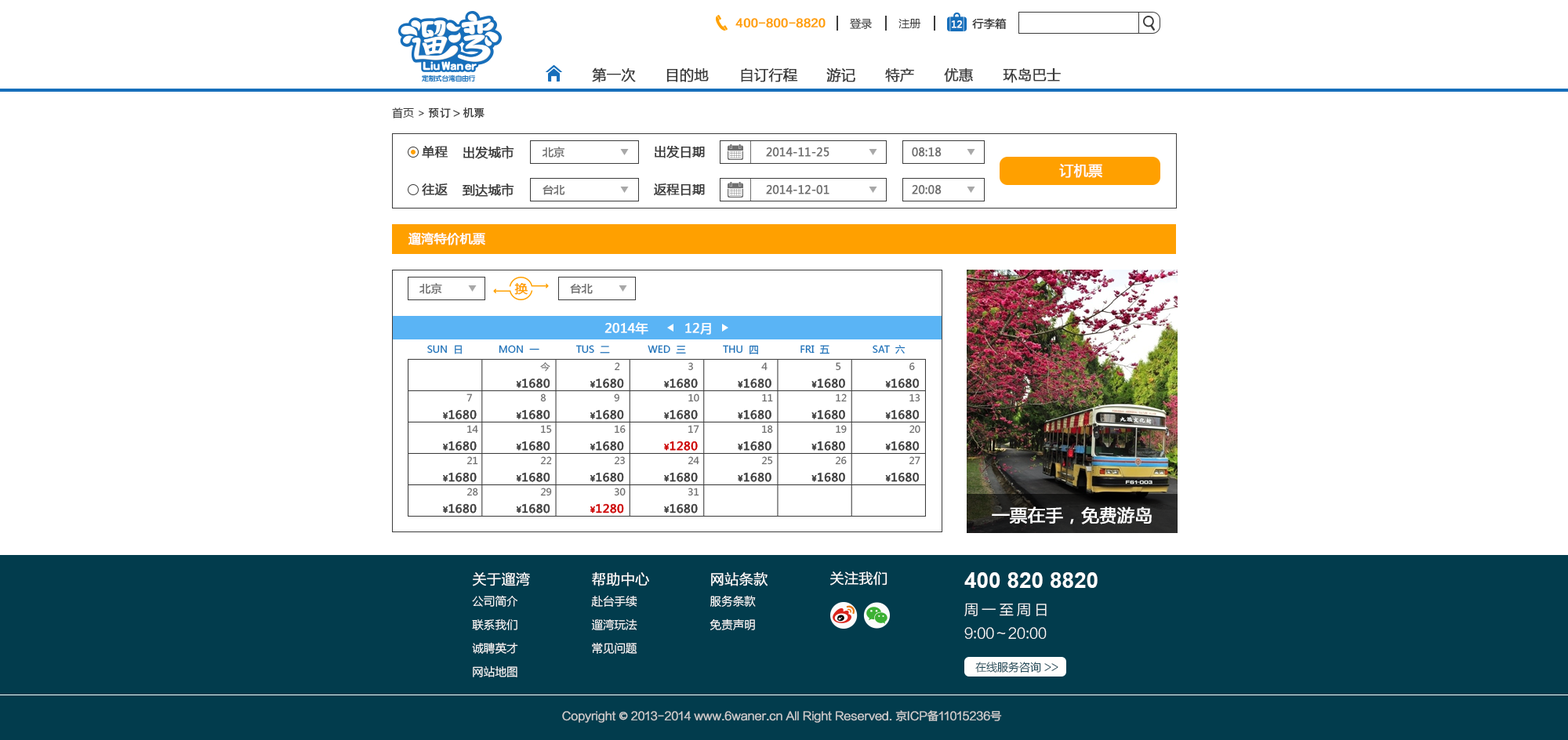
<style>
.page{position:relative;width:1568px;height:740px;background:#ffffff}
.page>*{position:absolute;margin:0}
.t1{font:11px "FZLTZHK--GBK1-0";color:#ffa000;font-weight:bold}
.t2{font:11px "MicrosoftYaHei";color:#3c3c3c}
.t3{font:9.4px "MicrosoftYaHei";color:#fefefe;font-weight:bold}
.t4{font:11px "MicrosoftYaHei";color:#3c3c3c;font-weight:bold}
.t5{font:14.1px "MicrosoftYaHei";color:#3c3c3c;font-weight:bold}
.t6{font:11px "AdobeHeitiStd-Regular";color:#3c3c3c}
.t7{font:12.5px "MicrosoftYaHei";color:#3c3c3c;font-weight:bold}
.t8{font:11px "MicrosoftYaHei";color:#6e6e6e;font-weight:bold}
.t9{font:14.1px "MicrosoftYaHei";color:#ffffff;font-weight:bold}
.t10{font:12.5px "MicrosoftYaHei";color:#ffffff;font-weight:bold}
.t11{font:12.5px "MicrosoftYaHei";color:#ffa000;font-weight:bold}
.t12{font:17.2px "MicrosoftYaHei";color:#ffffff;font-weight:bold}
.t13{font:11.4px/23.5px "FZLTXHK--GBK1-0";color:#ffffff}
.t14{font:14.1px/23.5px "FZLTXHK--GBK1-0";color:#ffffff;font-weight:bold}
.t15{font:14.1px "FZLTXHK--GBK1-0";color:#ffffff;font-weight:bold}
.t16{font:22px "Arial-BoldMT";color:#ffffff}
.t17{font:14.1px/23.5px "FZLTXHK--GBK1-0";color:#ffffff}
.t18{font:14.1px/23.5px "FZLTXHK--GBK1-0";letter-spacing:0.24em;color:#ffffff}
.t19{font:11px "FZLTXHK--GBK1-0"}
.t20{font:11px "FZLTXHK--GBK1-0";color:#d0d0d0;font-weight:bold}
.t21{font:11px "AdobeHeitiStd-Regular";color:#d0d0d0;font-weight:bold}
</style>
<div class="page">
<p class="t1" style="left:735px;top:18px;width:91px;height:10px">400-800-8820</p>
<p class="t2" style="left:850px;top:18px;width:22px;height:11px">登录</p>
<p class="t2" style="left:898px;top:19px;width:23px;height:9px">注册</p>
<p class="t3" style="left:951px;top:20px;width:11px;height:8px">12</p>
<p class="t4" style="left:972px;top:18px;width:35px;height:12px">行李箱</p>
<p class="t5" style="left:592px;top:67px;width:44px;height:15px">第一次</p>
<p class="t5" style="left:666px;top:68px;width:43px;height:14px">目的地</p>
<p class="t5" style="left:741px;top:68px;width:57px;height:14px">自订行程</p>
<p class="t5" style="left:826px;top:68px;width:29px;height:14px">游记</p>
<p class="t5" style="left:885px;top:68px;width:29px;height:14px">特产</p>
<p class="t5" style="left:944px;top:68px;width:29px;height:14px">优惠</p>
<p class="t5" style="left:1003px;top:68px;width:58px;height:15px">环岛巴士</p>
<p class="t6" style="left:392px;top:107px;width:93px;height:11px"><span class="t2">首页 &gt; </span>预订 &gt; 机票</p>
<p class="t7" style="left:422px;top:146px;width:26px;height:12px">单程</p>
<p class="t7" style="left:463px;top:146px;width:51px;height:13px">出发城市</p>
<p class="t8" style="left:542px;top:147px;width:22px;height:11px">北京</p>
<p class="t7" style="left:655px;top:146px;width:50px;height:12px">出发日期</p>
<p class="t8" style="left:766px;top:147px;width:63px;height:10px">2014-11-25</p>
<p class="t8" style="left:912px;top:147px;width:30px;height:10px">08:18</p>
<p class="t9" style="left:1059px;top:164px;width:43px;height:14px">订机票</p>
<p class="t7" style="left:422px;top:183px;width:26px;height:13px">往返</p>
<p class="t7" style="left:462px;top:183px;width:52px;height:14px">到达城市</p>
<p class="t8" style="left:543px;top:185px;width:22px;height:10px">台北</p>
<p class="t7" style="left:654px;top:183px;width:51px;height:13px">返程日期</p>
<p class="t8" style="left:766px;top:185px;width:63px;height:9px">2014-12-01</p>
<p class="t8" style="left:912px;top:185px;width:30px;height:9px">20:08</p>
<p class="t10" style="left:408px;top:232px;width:77px;height:13px">遛湾特价机票</p>
<p class="t8" style="left:419px;top:283px;width:23px;height:11px">北京</p>
<p class="t11" style="left:514px;top:283px;width:14px;height:12px">换</p>
<p class="t8" style="left:570px;top:284px;width:23px;height:10px">台北</p>
<p class="t10" style="left:604px;top:322px;width:44px;height:13px">2014年</p>
<p class="t10" style="left:685px;top:323px;width:26px;height:12px">12月</p>
<p class="t12" style="left:992px;top:506px;width:160px;height:18px">一票在手，免费游岛</p>
<p class="t13" style="left:472px;top:572px;width:58px;height:105px"><span class="t14">关于遛湾<br></span>公司简介<br>联系我们<br>诚聘英才<br>网站地图</p>
<p class="t13" style="left:591px;top:572px;width:58px;height:82px"><span class="t14">帮助中心<br></span>赴台手续 <br>遛湾玩法 <br>常见问题</p>
<p class="t13" style="left:710px;top:572px;width:58px;height:58px"><span class="t14">网站条款 <br></span>服务条款<br>免责声明</p>
<p class="t15" style="left:830px;top:572px;width:57px;height:14px">关注我们</p>
<p class="t16" style="left:964px;top:572px;width:134px;height:16px">400 820 8820</p>
<p class="t17" style="left:964px;top:603px;width:83px;height:36px"><span class="t18">周一至周日<br></span>9:00～20:00</p>
<p class="t19" style="left:975px;top:662px;width:83px;height:11px">在线服务咨询 &gt;&gt;</p>
<p class="t20" style="left:562px;top:710px;width:440px;height:13px">Copyright <span class="t21">©</span> 2013-2014 www.6waner.cn All Right Reserved. 京ICP备11015236号</p>
</div>
